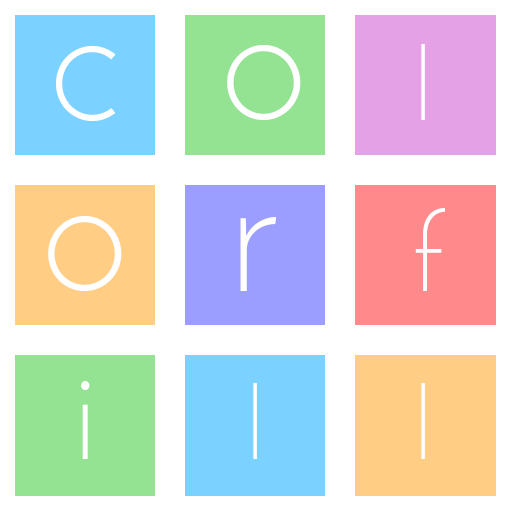
<style>
.page{position:relative;width:512px;height:512px;background:#ffffff}
.page>*{position:absolute;margin:0}
.t1{font:180px "JosefinSans-Light";color:#ffffff}
.t2{font:110px "JosefinSans-Light";color:#ffffff}
.t3{font:140px "JosefinSans-Light";color:#ffffff}
.t4{font:100px "JosefinSans-Light";color:#ffffff}
</style>
<div class="page">
<p class="t1" style="left:56px;top:46px;width:60px;height:75px">c</p>
<p class="t1" style="left:227px;top:45px;width:74px;height:75px">o</p>
<p class="t2" style="left:415px;top:208px;width:30px;height:83px">f</p>
<p class="t1" style="left:48px;top:216px;width:74px;height:75px">o</p>
<p class="t1" style="left:240px;top:217px;width:36px;height:74px">r</p>
<p class="t3" style="left:81px;top:381px;width:9px;height:78px">i</p>
<p class="t4" style="left:253px;top:383px;width:4px;height:76px">l</p>
<p class="t4" style="left:421px;top:383px;width:4px;height:76px">l</p>
</div>
